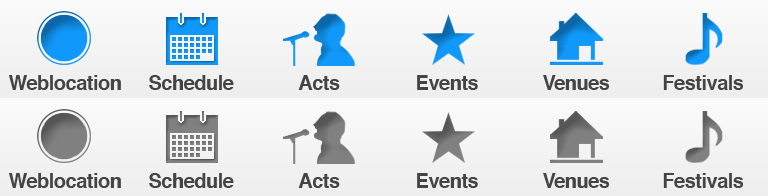
<style>
.page{position:relative;width:768px;height:196px}
.page>*{position:absolute;margin:0}
.t1{font:20px "Helvetica-Bold";letter-spacing:-0.025em;color:#444444}
</style>
<div class="page">
<p class="t1" style="left:9px;top:75px;width:112px;height:15px">Weblocation</p>
<p class="t1" style="left:149px;top:75px;width:85px;height:15px">Schedule</p>
<p class="t1" style="left:298px;top:75px;width:42px;height:15px">Acts</p>
<p class="t1" style="left:417px;top:75px;width:61px;height:15px">Events</p>
<p class="t1" style="left:543px;top:75px;width:66px;height:15px">Venues</p>
<p class="t1" style="left:663px;top:75px;width:80px;height:15px">Festivals</p>
<p class="t1" style="left:9px;top:173px;width:112px;height:15px">Weblocation</p>
<p class="t1" style="left:149px;top:173px;width:85px;height:15px">Schedule</p>
<p class="t1" style="left:298px;top:173px;width:42px;height:15px">Acts</p>
<p class="t1" style="left:417px;top:173px;width:61px;height:15px">Events</p>
<p class="t1" style="left:543px;top:173px;width:66px;height:15px">Venues</p>
<p class="t1" style="left:663px;top:173px;width:80px;height:15px">Festivals</p>
</div>
